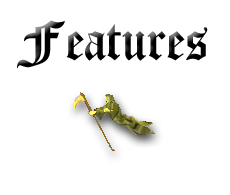
<style>
.page{position:relative;width:230px;height:195px;background:#ffffff}
.page>*{position:absolute;margin:0}
.t1{font:60px "Oldchristmas-Regular";color:#000000}
</style>
<div class="page">
<p class="t1" style="left:17px;top:20px;width:191px;height:49px">Features</p>
</div>
